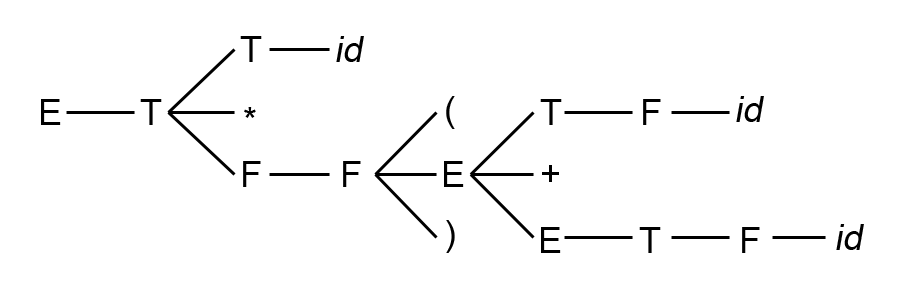
<style>
.page{position:relative;width:912px;height:286px;background:#ffffff}
.page>*{position:absolute;margin:0}
.t1{font:36px "ArialMT";color:#000000}
.t2{font:36px "ArialMT";color:#000000;font-style:italic}
</style>
<div class="page">
<p class="t1" style="left:240px;top:36px;width:22px;height:26px">T</p>
<p class="t2" style="left:336px;top:36px;width:28px;height:26px">id</p>
<p class="t1" style="left:41px;top:99px;width:20px;height:26px">E</p>
<p class="t1" style="left:140px;top:99px;width:22px;height:26px">T</p>
<p class="t1" style="left:446px;top:96px;width:9px;height:33px">(</p>
<p class="t1" style="left:540px;top:99px;width:22px;height:26px">T</p>
<p class="t1" style="left:643px;top:99px;width:18px;height:26px">F</p>
<p class="t2" style="left:736px;top:96px;width:28px;height:26px">id</p>
<p class="t1" style="left:244px;top:107px;width:12px;height:11px">*</p>
<p class="t1" style="left:243px;top:161px;width:18px;height:26px">F</p>
<p class="t1" style="left:343px;top:161px;width:18px;height:26px">F</p>
<p class="t1" style="left:444px;top:161px;width:20px;height:26px">E</p>
<p class="t1" style="left:542px;top:165px;width:17px;height:17px">+</p>
<p class="t1" style="left:446px;top:220px;width:9px;height:33px">)</p>
<p class="t1" style="left:541px;top:227px;width:20px;height:26px">E</p>
<p class="t1" style="left:639px;top:227px;width:22px;height:26px">T</p>
<p class="t1" style="left:742px;top:227px;width:18px;height:26px">F</p>
<p class="t2" style="left:836px;top:224px;width:28px;height:26px">id</p>
</div>
